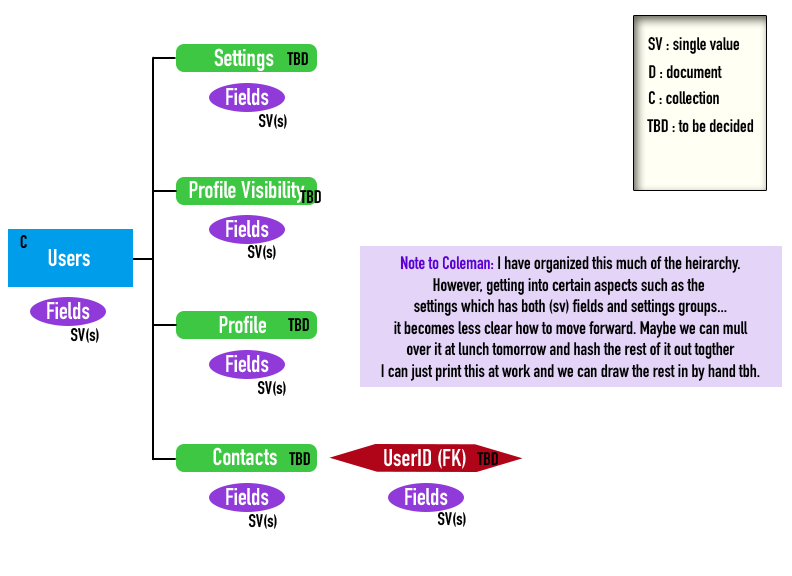
<style>
.page{position:relative;width:792px;height:576px;background:#ffffff}
.page>*{position:absolute;margin:0}
.t1{font:18px "DINCondensed-Bold";color:#000000}
.t2{font:18px "DINCondensed-Bold";color:#5e00d3}
</style>
<div class="page">
<p class="t1" style="left:648px;top:36px;width:92px;height:18px">SV : single value</p>
<p class="t1" style="left:649px;top:65px;width:73px;height:14px">D : document</p>
<p class="t1" style="left:648px;top:91px;width:71px;height:14px">C : collection</p>
<p class="t1" style="left:647px;top:119px;width:107px;height:14px">TBD : to be decided</p>
<p class="t1" style="left:381px;top:256px;width:379px;height:125px;text-align:center"><span class="t2">Note to Coleman:</span> I have organized this much of the heirarchy.<br>However, getting into certain aspects such as the <br>settings which has both (sv) fields and settings groups...<br>it becomes less clear how to move forward. Maybe we can mull<br>over it at lunch tomorrow and hash the rest of it out togther<br>I can just print this at work and we can draw the rest in by hand tbh.</p>
</div>
